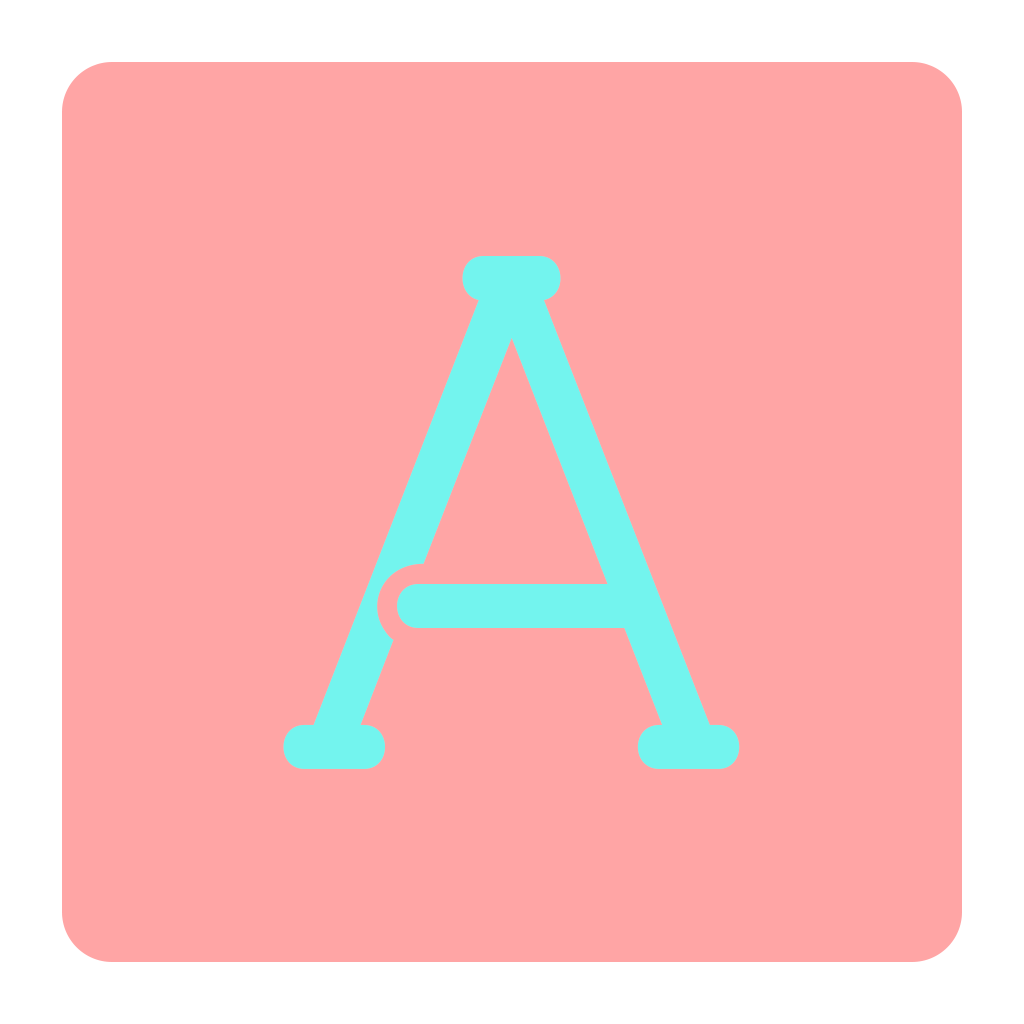
<style>
.page{position:relative;width:1024px;height:1024px;background:#ffa5a5}
.page>*{position:absolute;margin:0}
.t1{font:700px "pironv2stencil";color:#73f4ee}
</style>
<div class="page">
<p class="t1" style="left:283px;top:256px;width:457px;height:513px">A</p>
</div>
